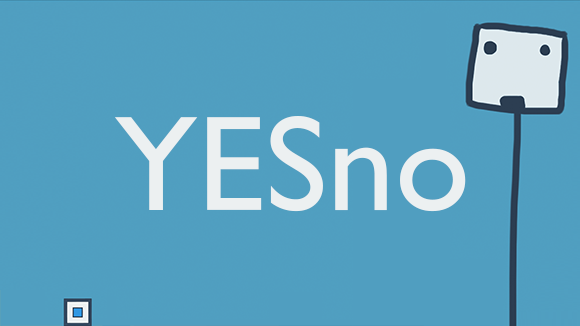
<style>
.page{position:relative;width:580px;height:326px;background:#509ec0}
.page>*{position:absolute;margin:0}
.t1{font:135.8px "GillSans";color:#ecf0f1}
</style>
<div class="page">
<p class="t1" style="left:115px;top:116px;width:351px;height:96px">YESno</p>
</div>
